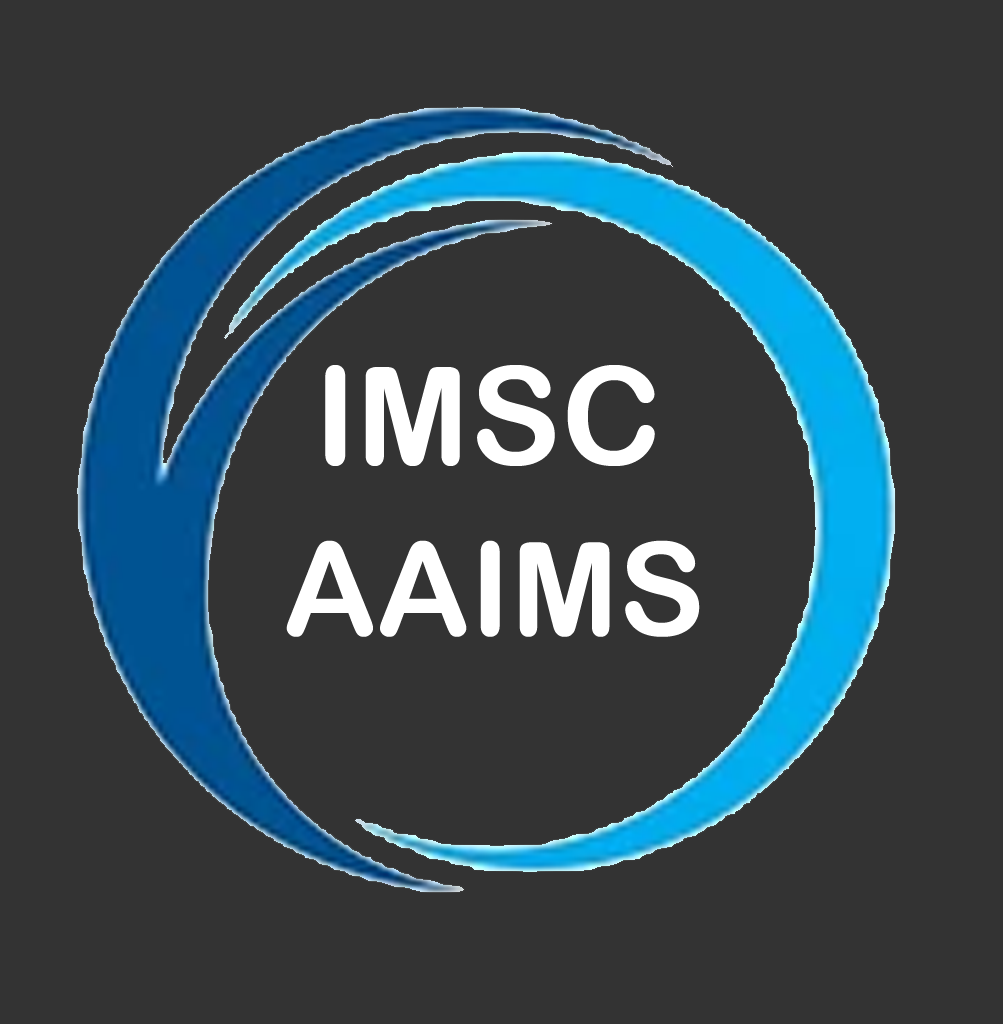
<style>
.page{position:relative;width:1003px;height:1024px;background:#333333}
.page>*{position:absolute;margin:0}
.t1{font:136.2px "ArialRoundedMTBold";color:#ffffff}
.t2{font:129.6px "ArialRoundedMTBold";color:#ffffff}
</style>
<div class="page">
<p class="t1" style="left:325px;top:365px;width:330px;height:101px">IMSC</p>
<p class="t2" style="left:286px;top:540px;width:414px;height:97px">AAIMS</p>
</div>
